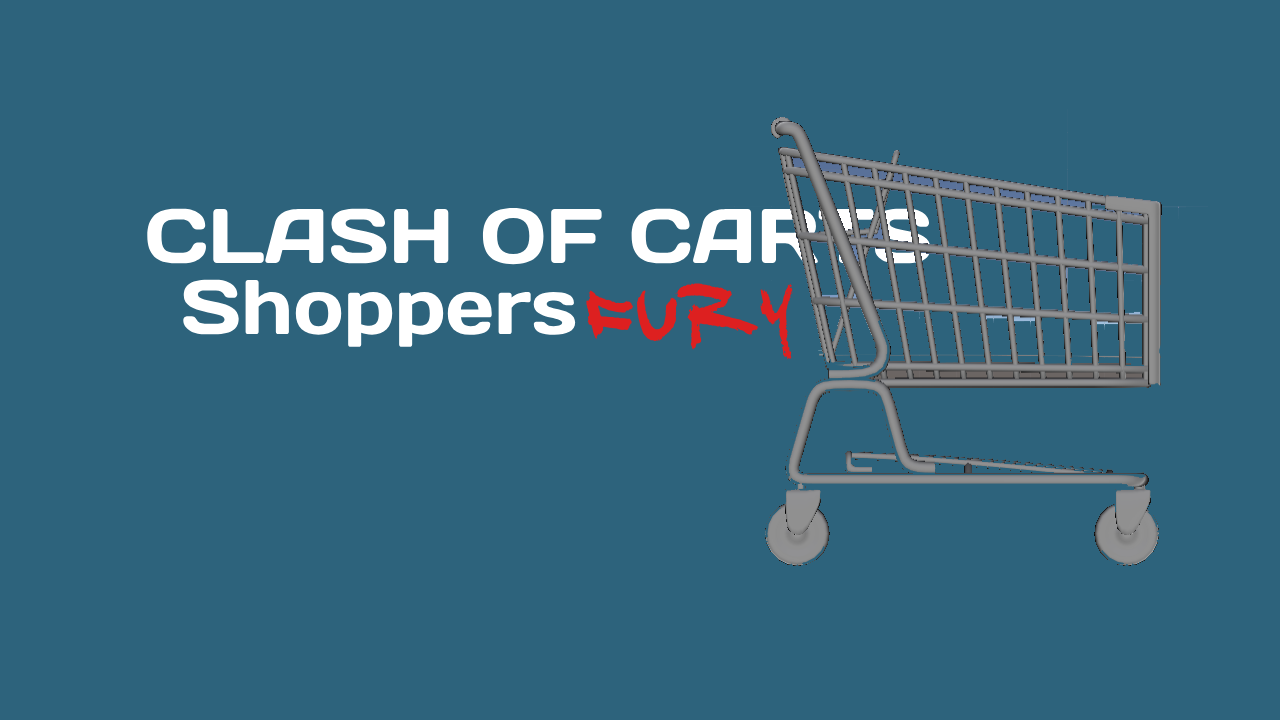
<style>
.page{position:relative;width:1280px;height:720px;background:#2d637c}
.page>*{position:absolute;margin:0}
.t1{font:77px "Days";color:#ffffff}
.t2{font:77px "DJ-Gross";color:#dd2020}
</style>
<div class="page">
<p class="t1" style="left:147px;top:207px;width:784px;height:58px">CLASH OF CARTS</p>
<p class="t1" style="left:183px;top:279px;width:393px;height:68px">Shoppers</p>
<p class="t2" style="left:586px;top:283px;width:208px;height:77px">FURY</p>
</div>
